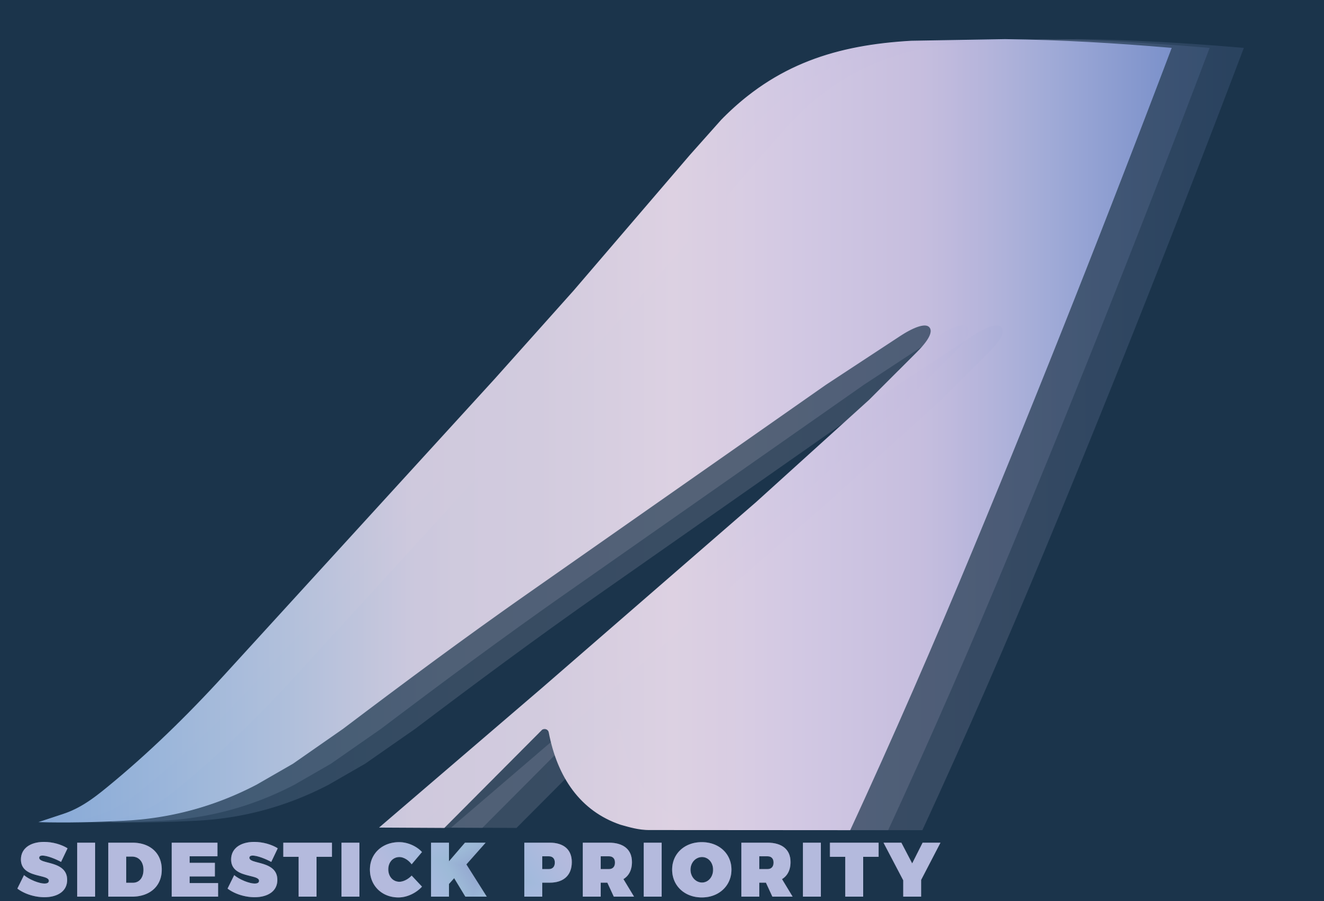
<style>
.page{position:relative;width:1324px;height:901px;background:#1b344b}
.page>*{position:absolute;margin:0}
.t1{font:76.9px "Montserrat-Black";letter-spacing:0.07em;color:#bfbadd;text-transform:uppercase}
</style>
<div class="page">
<p class="t1" style="left:17px;top:842px;width:924px;height:56px">SIDESTICK PRIORITY</p>
</div>
